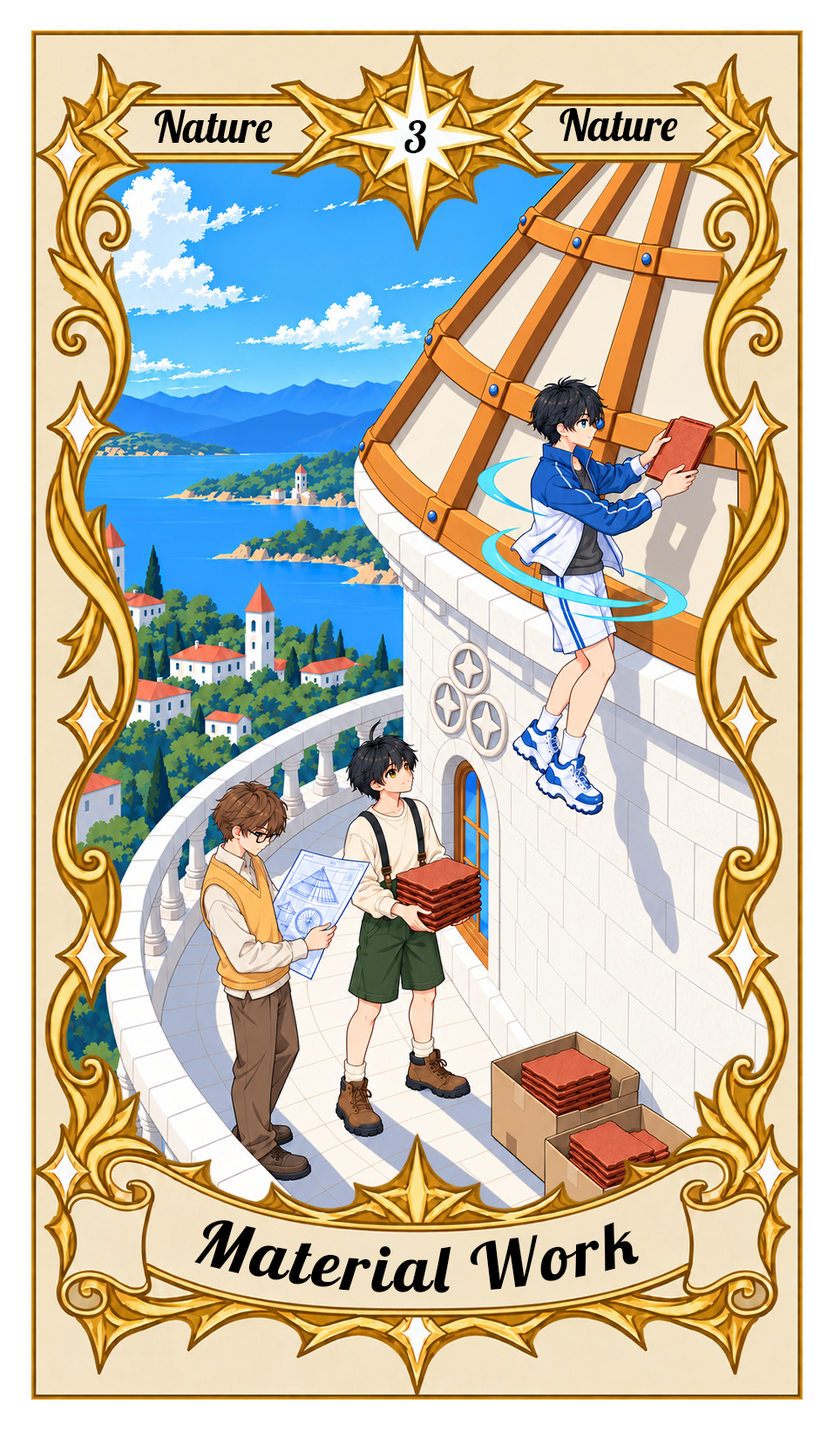
<style>
.page{position:relative;width:834px;height:1430px}
.page>*{position:absolute;margin:0}
.t1{font:43.6px "Lobster-Regular";color:#000000}
.t2{font:65.3px "Lobster-Regular";letter-spacing:0.05em;color:#000000}
</style>
<div class="page">
<p class="t1" style="left:154px;top:110px;width:119px;height:33px">Nature</p>
<p class="t1" style="left:559px;top:108px;width:119px;height:33px">Nature</p>
<p class="t1" style="left:404px;top:120px;width:22px;height:33px">3</p>
<p class="t2" style="left:194px;top:1220px;width:445px;height:74px">Material Work</p>
</div>
